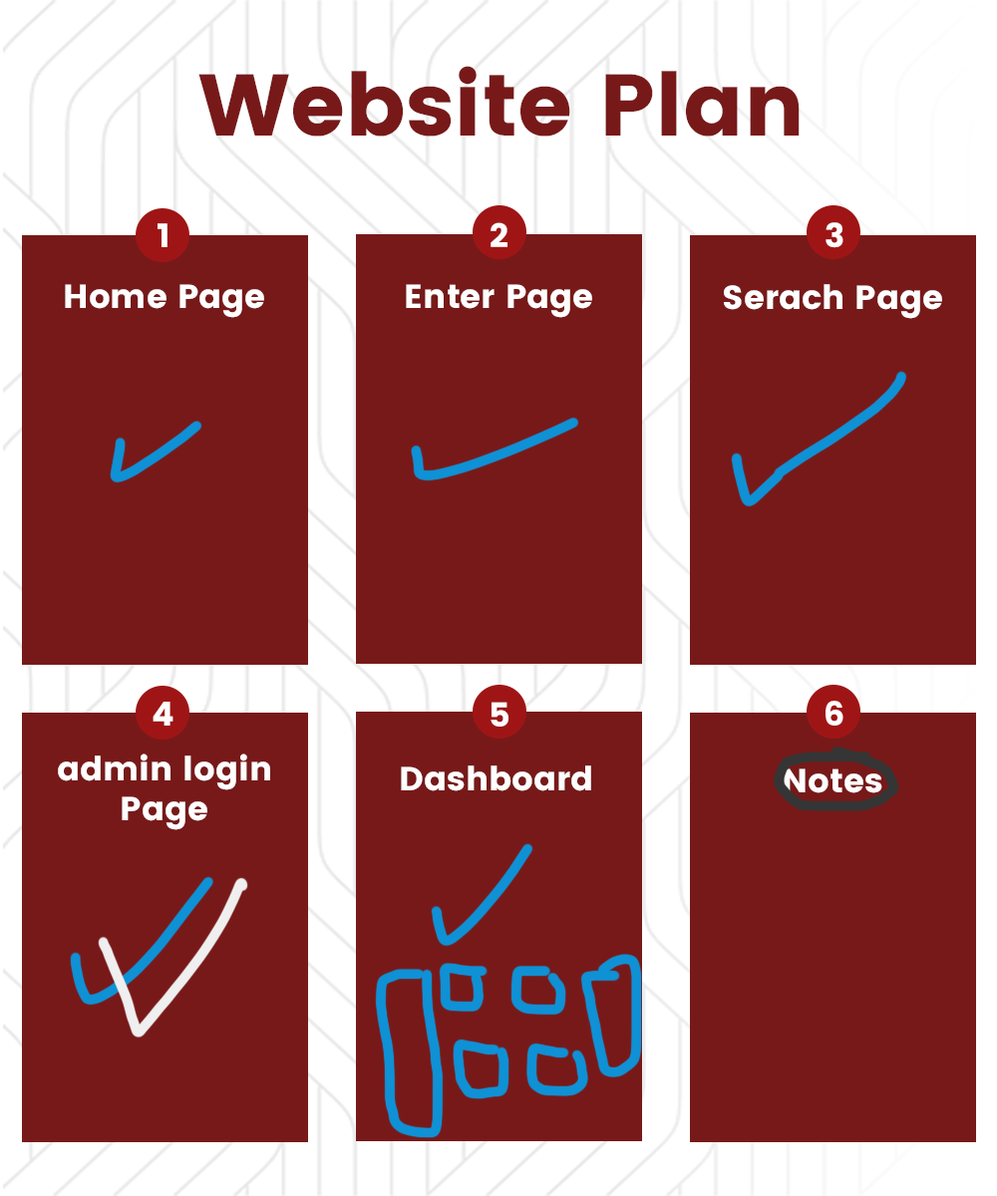
<style>
.page{position:relative;width:997px;height:1196px;background:#781919}
.page>*{position:absolute;margin:0}
.t1{font:87.2px "Poppins-Bold";color:#781919}
.t2{font:33.2px "Poppins-Bold";color:#fefefe}
</style>
<div class="page">
<p class="t1" style="left:198px;top:66px;width:601px;height:71px">Website Plan</p>
<p class="t2" style="left:158px;top:223px;width:9px;height:24px">1</p>
<p class="t2" style="left:490px;top:222px;width:17px;height:25px">2</p>
<p class="t2" style="left:825px;top:222px;width:18px;height:26px">3</p>
<p class="t2" style="left:65px;top:284px;width:199px;height:34px">Home Page</p>
<p class="t2" style="left:406px;top:284px;width:186px;height:34px">Enter Page</p>
<p class="t2" style="left:724px;top:284px;width:218px;height:35px">Serach Page</p>
<p class="t2" style="left:153px;top:702px;width:20px;height:24px">4</p>
<p class="t2" style="left:490px;top:702px;width:18px;height:25px">5</p>
<p class="t2" style="left:58px;top:754px;width:212px;height:76px;text-align:center">admin login<br>Page</p>
<p class="t2" style="left:401px;top:766px;width:190px;height:25px">Dashboard</p>
<p class="t2" style="left:784px;top:769px;width:98px;height:24px">Notes</p>
</div>
